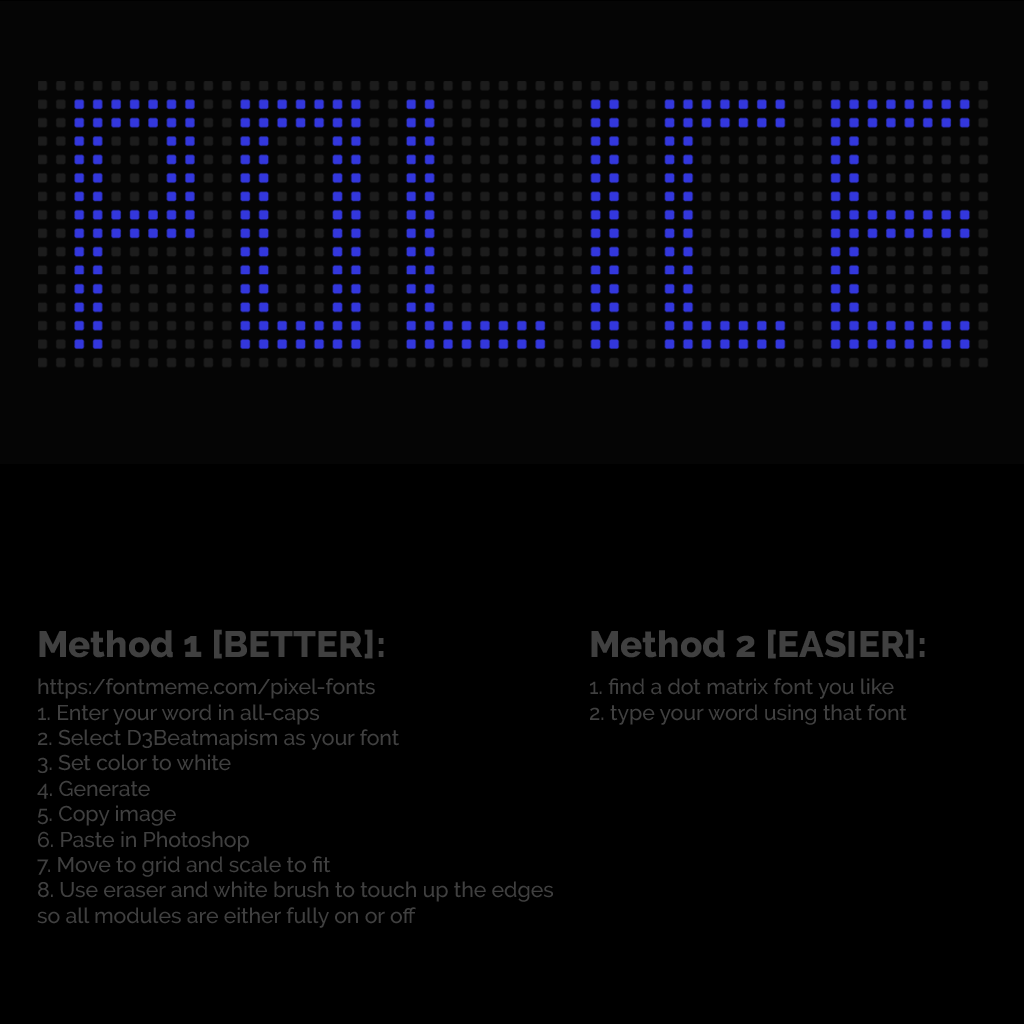
<style>
.page{position:relative;width:1024px;height:1024px;background:#000000}
.page>*{position:absolute;margin:0}
.t1{font:36.9px "Raleway-ExtraBold";color:#404040}
.t2{font:21.2px "Raleway-Medium";color:#404040}
</style>
<div class="page">
<p class="t1" style="left:39px;top:629px;width:345px;height:30px">Method 1 [BETTER]:</p>
<p class="t1" style="left:591px;top:629px;width:334px;height:30px">Method 2 [EASIER]:</p>
<p class="t2" style="left:37px;top:678px;width:516px;height:250px">https:/fontmeme.com/pixel-fonts<br>1. Enter your word in all-caps<br>2. Select D3Beatmapism as your font<br>3. Set color to white<br>4. Generate<br>5. Copy image<br>6. Paste in Photoshop<br>7. Move to grid and scale to fit<br>8. Use eraser and white brush to touch up the edges<br>so all modules are either fully on or off</p>
<p class="t2" style="left:590px;top:678px;width:317px;height:47px">1. find a dot matrix font you like<br>2. type your word using that font</p>
</div>
